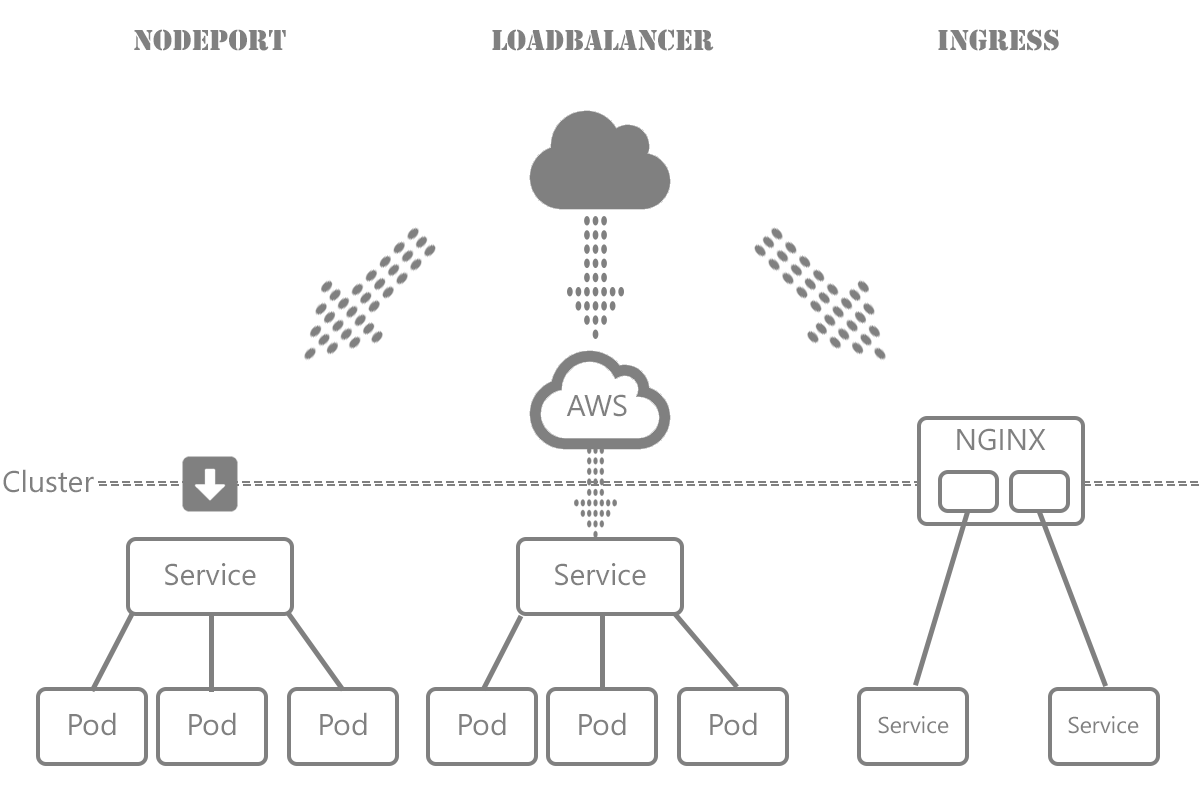
<style>
.page{position:relative;width:1200px;height:800px;background:#ffffff}
.page>*{position:absolute;margin:0}
.t1{font:30px "Stencil";color:#808080}
.t2{font:30px "SegoeUI";color:#808080}
.t3{font:23px "SegoeUI";color:#808080}
</style>
<div class="page">
<p class="t1" style="left:134px;top:29px;width:152px;height:22px">NodePort</p>
<p class="t1" style="left:492px;top:29px;width:222px;height:22px">LoadBalancer</p>
<p class="t1" style="left:938px;top:29px;width:121px;height:22px">Ingress</p>
<p class="t2" style="left:566px;top:394px;width:61px;height:23px">AWS</p>
<p class="t2" style="left:957px;top:428px;width:89px;height:23px">NGINX</p>
<p class="t2" style="left:3px;top:469px;width:91px;height:24px">Cluster</p>
<p class="t2" style="left:165px;top:563px;width:91px;height:23px">Service</p>
<p class="t2" style="left:555px;top:563px;width:91px;height:23px">Service</p>
<p class="t2" style="left:69px;top:712px;width:47px;height:24px">Pod</p>
<p class="t2" style="left:189px;top:712px;width:47px;height:24px">Pod</p>
<p class="t2" style="left:320px;top:712px;width:47px;height:24px">Pod</p>
<p class="t2" style="left:459px;top:712px;width:47px;height:24px">Pod</p>
<p class="t2" style="left:579px;top:712px;width:47px;height:24px">Pod</p>
<p class="t2" style="left:710px;top:712px;width:47px;height:24px">Pod</p>
<p class="t3" style="left:878px;top:716px;width:71px;height:18px">Service</p>
<p class="t3" style="left:1068px;top:716px;width:71px;height:18px">Service</p>
</div>
